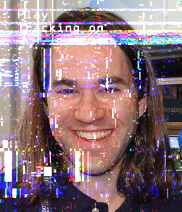
<style>
.page{position:relative;width:182px;height:212px}
.page>*{position:absolute;margin:0}
.t1{font:11px "OCRAStd";color:#fdfdfd}
</style>
<div class="page">
<p class="t1" style="left:18px;top:9px;width:85px;height:25px">Play<br>Tracking on</p>
</div>
